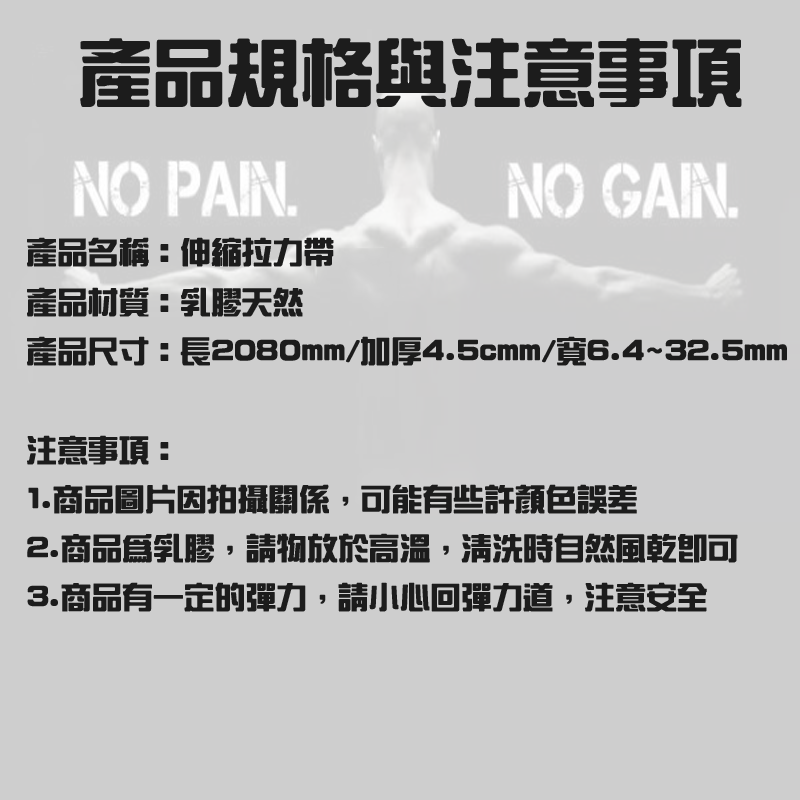
<style>
.page{position:relative;width:800px;height:800px;background:#cecece}
.page>*{position:absolute;margin:0}
.t1{font:72px "HanWangZonYi";color:#1c1c1c;font-weight:bold}
.t2{font:30px "HanWangZonYi";color:#1c1c1c;font-weight:bold}
</style>
<div class="page">
<p class="t1" style="left:80px;top:38px;width:662px;height:70px">產品規格與注意事項</p>
<p class="t2" style="left:27px;top:237px;width:760px;height:375px">產品名稱：伸縮拉力帶<br>產品材質：乳膠天然<br>產品尺寸：長2080mm/加厚4.5cmm/寬6.4~32.5mm<br><br>注意事項：<br>1.商品圖片因拍攝關係，可能有些許顏色誤差<br>2.商品為乳膠，請物放於高溫，清洗時自然風乾即可<br>3.商品有一定的彈力，請小心回彈力道，注意安全</p>
</div>
